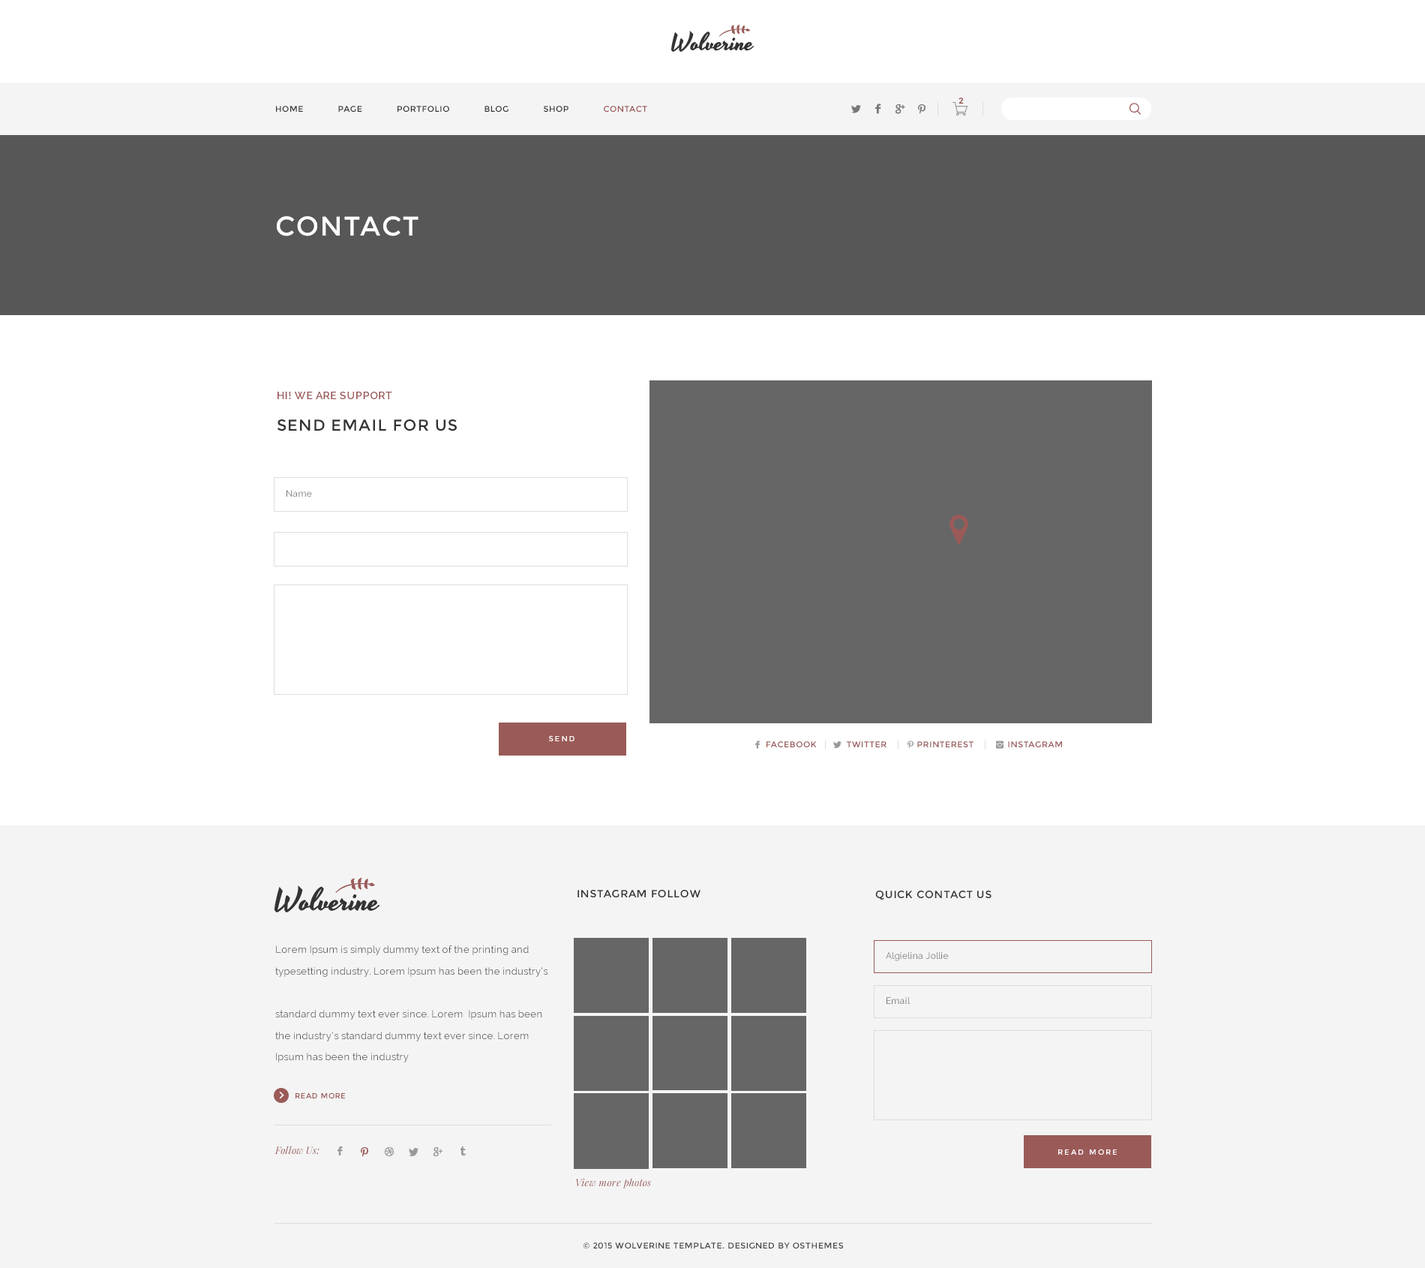
<style>
.page{position:relative;width:1425px;height:1268px;background:#ffffff}
.page>*{position:absolute;margin:0}
.t1{font:8.2px "Montserrat-Regular";color:#9a5a58;font-weight:bold}
.t2{font:8.2px "Montserrat-Regular";letter-spacing:0.05em;color:#333333}
.t3{font:8.2px "Montserrat-Regular";letter-spacing:0.05em;color:#9b5a57}
.t4{font:27px "Montserrat-Regular";letter-spacing:0.05em;color:#ffffff}
.t5{font:10.5px "Raleway-SemiBold";letter-spacing:0.05em;color:#995958}
.t6{font:15.8px "Montserrat-Regular";letter-spacing:0.05em;color:#333333}
.t7{font:9px "Raleway";letter-spacing:0.02em;color:#777777}
.t8{font:7.5px "Montserrat-Regular";letter-spacing:0.2em;color:#ffffff}
.t9{font:8.2px "Montserrat-Regular";letter-spacing:0.05em;color:#995958}
.t10{font:10.5px "Montserrat-Regular";letter-spacing:0.05em;color:#333333}
.t11{font:9.8px/21.5px "Raleway";letter-spacing:0.02em;color:#555555}
.t12{font:7.5px "Montserrat-Regular";letter-spacing:0.05em;color:#9a5a58}
.t13{font:9.8px "PlayfairDisplay-Italic";letter-spacing:0.02em;color:#995958}
.t14{font:9.8px "PlayfairDisplay-Italic";letter-spacing:0.02em;color:#9a5a58}
.t15{font:8.2px "Montserrat-Regular";letter-spacing:0.05em;color:#444444}
</style>
<div class="page">
<p class="t1" style="left:958px;top:98px;width:6px;height:6px">2</p>
<p class="t2" style="left:276px;top:106px;width:371px;height:6px">HOME      PAGE      PORTFOLIO      BLOG      SHOP      <span class="t3">CONTACT</span></p>
<p class="t4" style="left:276px;top:216px;width:142px;height:20px">CONTACT</p>
<p class="t5" style="left:278px;top:392px;width:114px;height:7px">HI! WE ARE SUPPORT</p>
<p class="t6" style="left:277px;top:419px;width:180px;height:12px">SEND EMAIL FOR US</p>
<p class="t7" style="left:286px;top:490px;width:26px;height:6px">Name</p>
<p class="t8" style="left:549px;top:735px;width:25px;height:6px">SEND</p>
<p class="t9" style="left:766px;top:741px;width:296px;height:6px">FACEBOOK        TWITTER        PRINTEREST         INSTAGRAM</p>
<p class="t10" style="left:578px;top:890px;width:122px;height:7px">INSTAGRAM FOLLOW</p>
<p class="t10" style="left:875px;top:890px;width:117px;height:9px">QUICK CONTACT US</p>
<p class="t11" style="left:275px;top:945px;width:273px;height:117px">Lorem Ipsum is simply dummy text of the printing and typesetting industry. Lorem Ipsum has been the industry’s <br> <br>standard dummy text ever since. Lorem  Ipsum has been the industry’s standard dummy text ever since. Lorem  Ipsum has been the industry</p>
<p class="t7" style="left:886px;top:952px;width:63px;height:9px">Algielina Jollie</p>
<p class="t7" style="left:886px;top:997px;width:24px;height:7px">Email</p>
<p class="t12" style="left:296px;top:1092px;width:49px;height:6px">READ MORE</p>
<p class="t13" style="left:274px;top:1145px;width:46px;height:9px">Follow Us:</p>
<p class="t8" style="left:1058px;top:1148px;width:59px;height:6px">READ MORE</p>
<p class="t14" style="left:576px;top:1178px;width:75px;height:10px">View more photos</p>
<p class="t15" style="left:583px;top:1242px;width:261px;height:7px">© 2015 WOLVERINE TEMPLATE. DESIGNED BY OSTHEMES</p>
</div>
